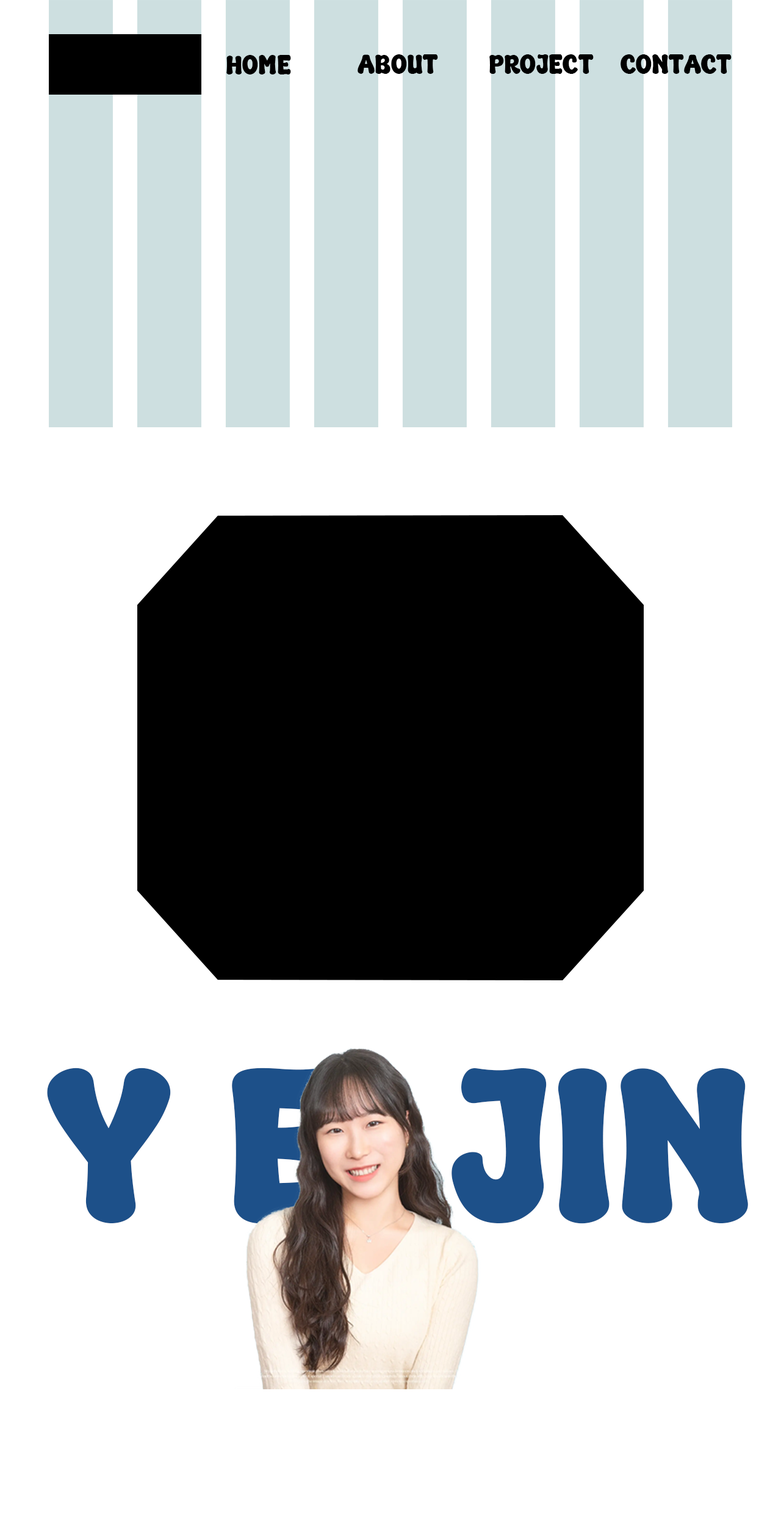
<style>
.page{position:relative;width:781px;height:1526px;background:#ffffff}
.page>*{position:absolute;margin:0}
.t1{font:27.5px "SuperCreamy";color:#000000}
.t2{font:221.5px "SuperCreamy";color:#1d5089}
</style>
<div class="page">
<p class="t1" style="left:226px;top:55px;width:65px;height:19px">HOME</p>
<p class="t1" style="left:358px;top:54px;width:80px;height:20px">ABOUT</p>
<p class="t1" style="left:490px;top:54px;width:104px;height:20px">PROJECT</p>
<p class="t1" style="left:621px;top:54px;width:111px;height:20px">CONTACT</p>
<p class="t2" style="left:47px;top:1068px;width:701px;height:156px">Y E  JIN</p>
</div>
